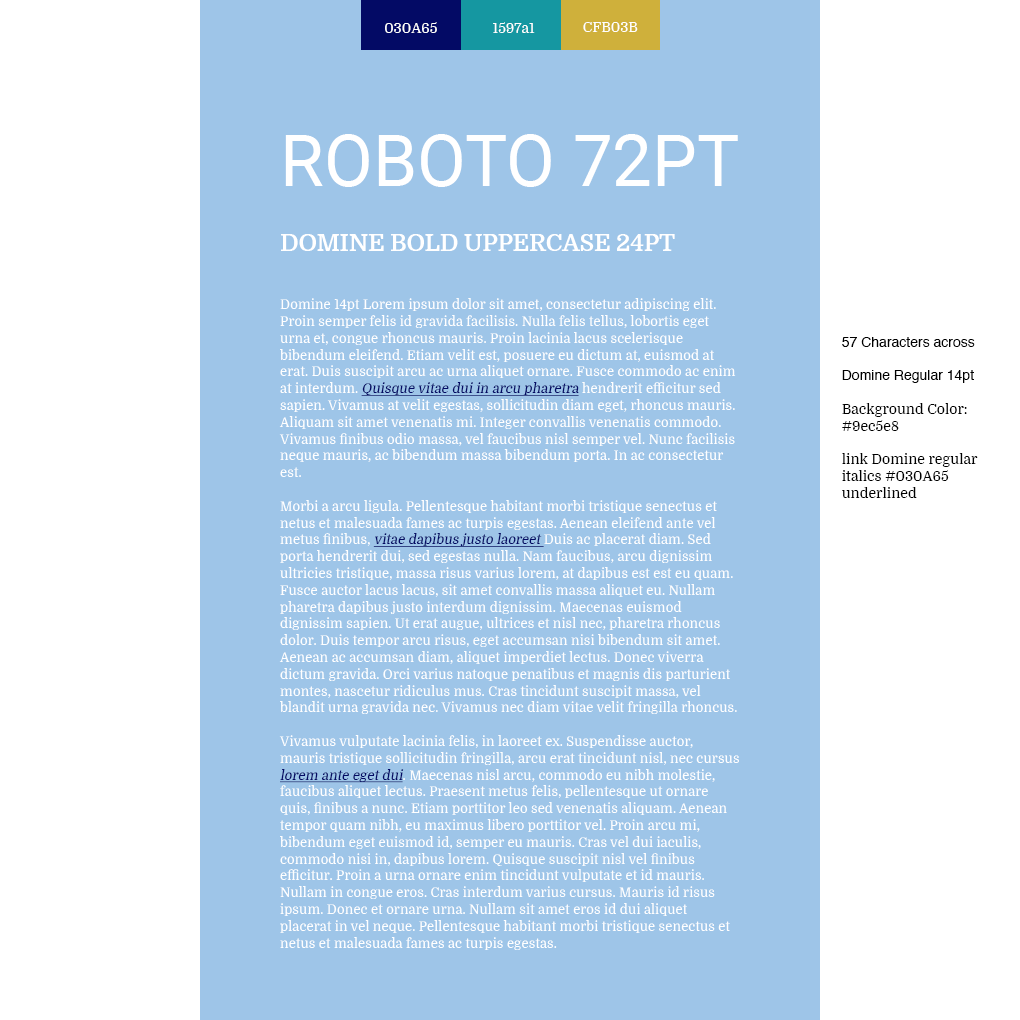
<style>
.page{position:relative;width:1020px;height:1020px;background:#9ec5e8}
.page>*{position:absolute;margin:0}
.t1{font:14px "Domine-Regular";color:#ffffff}
.t2{font:72px "Roboto-Regular";color:#ffffff}
.t3{font:24px "Domine-Bold";color:#ffffff}
.t4{font:14px "Domine-Regular";color:#ffffff;scale:0.95 1}
.t5{font:14px "Domine-Regular";color:#030a65;font-style:italic;text-decoration:underline;scale:0.95 1}
.t6{font:14px "Domine-Regular";color:#000000}
.t7{font:14px "Helvetica";color:#000000}
</style>
<div class="page">
<p class="t1" style="left:385px;top:22px;width:52px;height:11px">030A65</p>
<p class="t1" style="left:493px;top:22px;width:42px;height:11px">1597a1</p>
<p class="t1" style="left:583px;top:22px;width:55px;height:10px">CFB03B</p>
<p class="t2" style="left:285px;top:134px;width:453px;height:53px">ROBOTO 72PT</p>
<p class="t3" style="left:281px;top:234px;width:394px;height:17px">DOMINE BOLD UPPERCASE 24PT</p>
<p class="t4" style="left:279px;top:298px;width:460px;height:652px">Domine 14pt Lorem ipsum dolor sit amet, consectetur adipiscing elit. Proin semper felis id gravida facilisis. Nulla felis tellus, lobortis eget urna et, congue rhoncus mauris. Proin lacinia lacus scelerisque bibendum eleifend. Etiam velit est, posuere eu dictum at, euismod at erat. Duis suscipit arcu ac urna aliquet ornare. Fusce commodo ac enim at interdum. <span class="t5">Quisque vitae dui in arcu pharetra</span> hendrerit efficitur sed sapien. Vivamus at velit egestas, sollicitudin diam eget, rhoncus mauris. Aliquam sit amet venenatis mi. Integer convallis venenatis commodo. Vivamus finibus odio massa, vel faucibus nisl semper vel. Nunc facilisis neque mauris, ac bibendum massa bibendum porta. In ac consectetur est.<br><br>Morbi a arcu ligula. Pellentesque habitant morbi tristique senectus et netus et malesuada fames ac turpis egestas. Aenean eleifend ante vel metus finibus, <span class="t5">vitae dapibus justo laoreet </span>Duis ac placerat diam. Sed porta hendrerit dui, sed egestas nulla. Nam faucibus, arcu dignissim ultricies tristique, massa risus varius lorem, at dapibus est est eu quam. Fusce auctor lacus lacus, sit amet convallis massa aliquet eu. Nullam pharetra dapibus justo interdum dignissim. Maecenas euismod dignissim sapien. Ut erat augue, ultrices et nisl nec, pharetra rhoncus dolor. Duis tempor arcu risus, eget accumsan nisi bibendum sit amet. Aenean ac accumsan diam, aliquet imperdiet lectus. Donec viverra dictum gravida. Orci varius natoque penatibus et magnis dis parturient montes, nascetur ridiculus mus. Cras tincidunt suscipit massa, vel blandit urna gravida nec. Vivamus nec diam vitae velit fringilla rhoncus.<br><br>Vivamus vulputate lacinia felis, in laoreet ex. Suspendisse auctor, mauris tristique sollicitudin fringilla, arcu erat tincidunt nisl, nec cursus <span class="t5">lorem ante eget dui</span>. Maecenas nisl arcu, commodo eu nibh molestie, faucibus aliquet lectus. Praesent metus felis, pellentesque ut ornare quis, finibus a nunc. Etiam porttitor leo sed venenatis aliquam. Aenean tempor quam nibh, eu maximus libero porttitor vel. Proin arcu mi, bibendum eget euismod id, semper eu mauris. Cras vel dui iaculis, commodo nisi in, dapibus lorem. Quisque suscipit nisl vel finibus efficitur. Proin a urna ornare enim tincidunt vulputate et id mauris. Nullam in congue eros. Cras interdum varius cursus. Mauris id risus ipsum. Donec et ornare urna. Nullam sit amet eros id dui aliquet placerat in vel neque. Pellentesque habitant morbi tristique senectus et netus et malesuada fames ac turpis egestas.</p>
<p class="t6" style="left:842px;top:337px;width:136px;height:161px"><span class="t7">57 Characters across<br><br>Domine Regular 14pt<br><br></span>Background Color:<br>#9ec5e8<br><br>link Domine regular <br>italics #030A65 <br>underlined</p>
</div>
